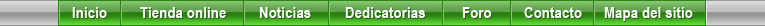
<style>
.page{position:relative;width:765px;height:26px}
.page>*{position:absolute;margin:0}
.t1{font:16px "ArialNarrow-Bold";letter-spacing:0.01em;color:#ffffff}
</style>
<div class="page">
<p class="t1" style="left:72px;top:7px;width:35px;height:11px">Inicio</p>
<p class="t1" style="left:140px;top:7px;width:86px;height:11px">Tienda online</p>
<p class="t1" style="left:259px;top:7px;width:52px;height:11px">Noticias</p>
<p class="t1" style="left:345px;top:7px;width:80px;height:11px">Dedicatorias</p>
<p class="t1" style="left:462px;top:7px;width:30px;height:11px">Foro</p>
<p class="t1" style="left:524px;top:7px;width:58px;height:11px">Contacto</p>
<p class="t1" style="left:604px;top:7px;width:89px;height:14px">Mapa del sitio</p>
</div>
